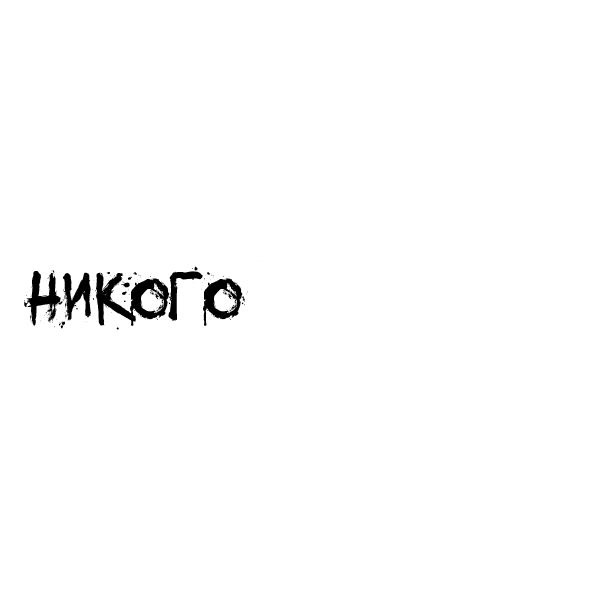
<style>
.page{position:relative;width:600px;height:600px;background:#ffffff}
.page>*{position:absolute;margin:0}
.t1{font:100px "YouMurdererBB";color:#000000}
</style>
<div class="page">
<p class="t1" style="left:24px;top:261px;width:235px;height:69px">никого</p>
</div>
